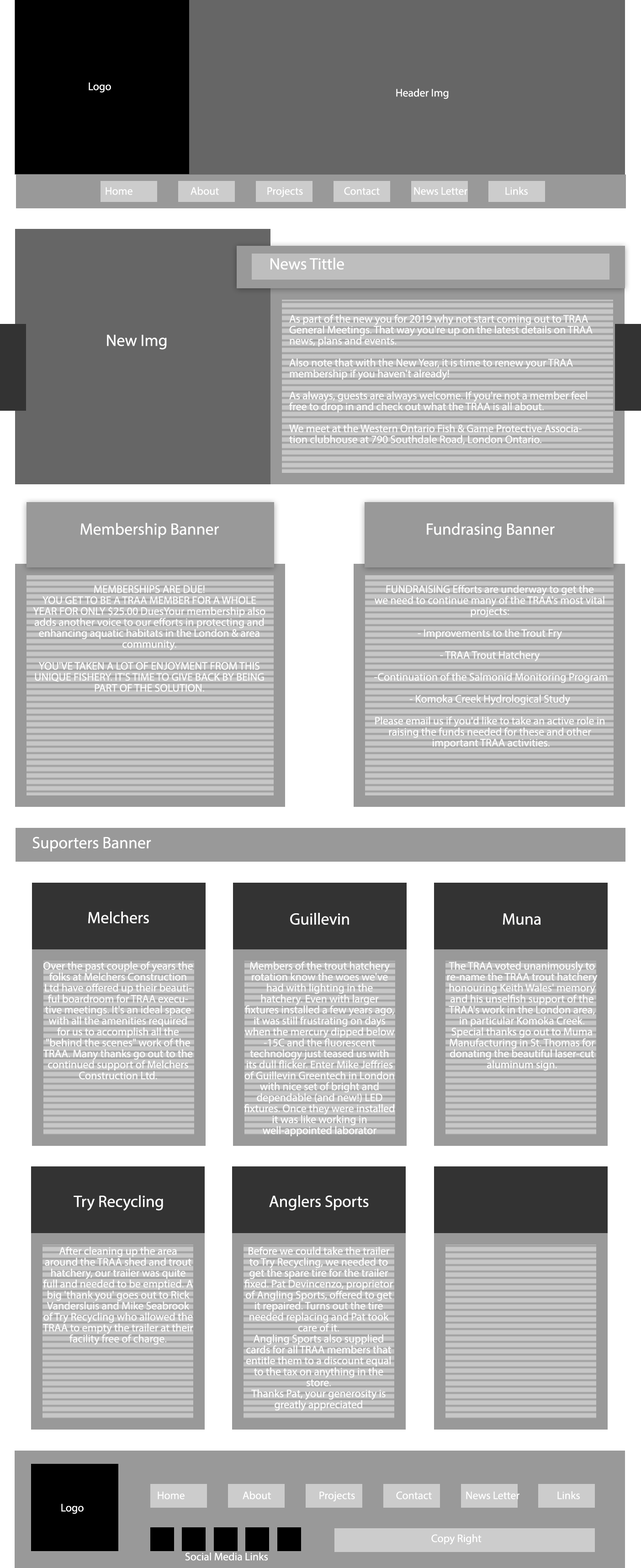
<style>
.page{position:relative;width:641px;height:1568px}
.page>*{position:absolute;margin:0}
.t1{font:11px "MyriadPro-Regular";color:#ffffff}
.t2{font:16.4px "MyriadPro-Regular";color:#ffffff}
.t3{font:11px/11px "MyriadPro-Regular";color:#ffffff}
</style>
<div class="page">
<p class="t1" style="left:89px;top:82px;width:22px;height:11px">Logo</p>
<p class="t1" style="left:396px;top:89px;width:53px;height:10px">Header Img</p>
<p class="t1" style="left:106px;top:187px;width:26px;height:8px">Home</p>
<p class="t1" style="left:191px;top:187px;width:28px;height:8px">About</p>
<p class="t1" style="left:267px;top:187px;width:36px;height:10px">Projects</p>
<p class="t1" style="left:344px;top:187px;width:36px;height:8px">Contact</p>
<p class="t1" style="left:414px;top:187px;width:53px;height:8px">News Letter</p>
<p class="t1" style="left:505px;top:187px;width:23px;height:8px">Links</p>
<p class="t2" style="left:270px;top:258px;width:74px;height:12px">News Tittle</p>
<p class="t3" style="left:289px;top:314px;width:304px;height:131px">As part of the new you for 2019 why not start coming out to TRAA General Meetings. That way you're up on the latest details on TRAA news, plans and events.<br><br>Also note that with the New Year, it is time to renew your TRAA membership if you haven't already!<br><br>As always, guests are always welcome. If you're not a member feel free to drop in and check out what the TRAA is all about.<br><br>We meet at the Western Ontario Fish &amp; Game Protective Association clubhouse at 790 Southdale Road, London Ontario.</p>
<p class="t2" style="left:107px;top:334px;width:60px;height:16px">New Img</p>
<p class="t2" style="left:80px;top:523px;width:139px;height:15px">Membership Banner</p>
<p class="t2" style="left:427px;top:523px;width:128px;height:15px">Fundrasing Banner</p>
<p class="t3" style="left:33px;top:585px;width:232px;height:107px;text-align:center">MEMBERSHIPS ARE DUE! <br>YOU GET TO BE A TRAA MEMBER FOR A WHOLE YEAR FOR ONLY $25.00 DuesYour membership also adds another voice to our efforts in protecting and enhancing aquatic habitats in the London &amp; area community.<br><br>YOU'VE TAKEN A LOT OF ENJOYMENT FROM THIS UNIQUE FISHERY. IT'S TIME TO GIVE BACK BY BEING PART OF THE SOLUTION.</p>
<p class="t3" style="left:374px;top:585px;width:233px;height:164px;text-align:center">FUNDRAISING Efforts are underway to get the<br>we need to continue many of the TRAA's most vital projects:<br><br>- Improvements to the Trout Fry<br><br>- TRAA Trout Hatchery <br><br> -Continuation of the Salmonid Monitoring Program<br><br>- Komoka Creek Hydrological Study <br><br>Please email us if you'd like to take an active role in raising the funds needed for these and other<br> important TRAA activities.</p>
<p class="t2" style="left:32px;top:837px;width:119px;height:15px">Suporters Banner</p>
<p class="t2" style="left:88px;top:911px;width:61px;height:12px">Melchers</p>
<p class="t2" style="left:290px;top:913px;width:59px;height:12px">Guillevin</p>
<p class="t2" style="left:503px;top:913px;width:38px;height:12px">Muna</p>
<p class="t3" style="left:43px;top:961px;width:150px;height:119px;text-align:center">Over the past couple of years the folks at Melchers Construction Ltd have offered up their beautiful boardroom for TRAA executive meetings. It's an ideal space with all the amenities required for us to accomplish all the "behind the scenes" work of the TRAA. Many thanks go out to the continued support of Melchers Construction Ltd.</p>
<p class="t3" style="left:244px;top:961px;width:150px;height:175px;text-align:center">Members of the trout hatchery rotation know the woes we've had with lighting in the hatchery. Even with larger fixtures installed a few years ago, it was still frustrating on days when the mercury dipped below -15C and the fluorescent technology just teased us with its dull flicker. Enter Mike Jeffries of Guillevin Greentech in London with nice set of bright and dependable (and new!) LED fixtures. Once they were installed it was like working in well-appointed laborator</p>
<p class="t3" style="left:447px;top:961px;width:151px;height:110px;text-align:center">The TRAA voted unanimously to re-name the TRAA trout hatchery honouring Keith Wales' memory and his unselfish support of the TRAA's work in the London area, in particular Komoka Creek. Special thanks go out to Muma Manufacturing in St. Thomas for donating the beautiful laser-cut aluminum sign.</p>
<p class="t2" style="left:74px;top:1195px;width:89px;height:16px">Try Recycling</p>
<p class="t2" style="left:269px;top:1195px;width:100px;height:16px">Anglers Sports</p>
<p class="t3" style="left:43px;top:1246px;width:150px;height:99px;text-align:center">After cleaning up the area around the TRAA shed and trout hatchery, our trailer was quite full and needed to be emptied. A big 'thank you' goes out to Rick Vandersluis and Mike Seabrook of Try Recycling who allowed the TRAA to empty the trailer at their facility free of charge.</p>
<p class="t3" style="left:244px;top:1246px;width:149px;height:165px;text-align:center">Before we could take the trailer to Try Recycling, we needed to get the spare tire for the trailer fixed. Pat Devincenzo, proprietor of Angling Sports, offered to get it repaired. Turns out the tire needed replacing and Pat took care of it.<br>Angling Sports also supplied cards for all TRAA members that entitle them to a discount equal to the tax on anything in the store.<br>Thanks Pat, your generosity is greatly appreciated</p>
<p class="t1" style="left:158px;top:1491px;width:27px;height:8px">Home</p>
<p class="t1" style="left:243px;top:1491px;width:28px;height:8px">About</p>
<p class="t1" style="left:319px;top:1491px;width:36px;height:11px">Projects</p>
<p class="t1" style="left:396px;top:1491px;width:36px;height:8px">Contact</p>
<p class="t1" style="left:466px;top:1491px;width:53px;height:8px">News Letter</p>
<p class="t1" style="left:557px;top:1491px;width:23px;height:8px">Links</p>
<p class="t1" style="left:61px;top:1504px;width:23px;height:10px">Logo</p>
<p class="t1" style="left:431px;top:1534px;width:51px;height:11px">Copy Right</p>
<p class="t1" style="left:185px;top:1552px;width:83px;height:9px">Social Media Links</p>
</div>
